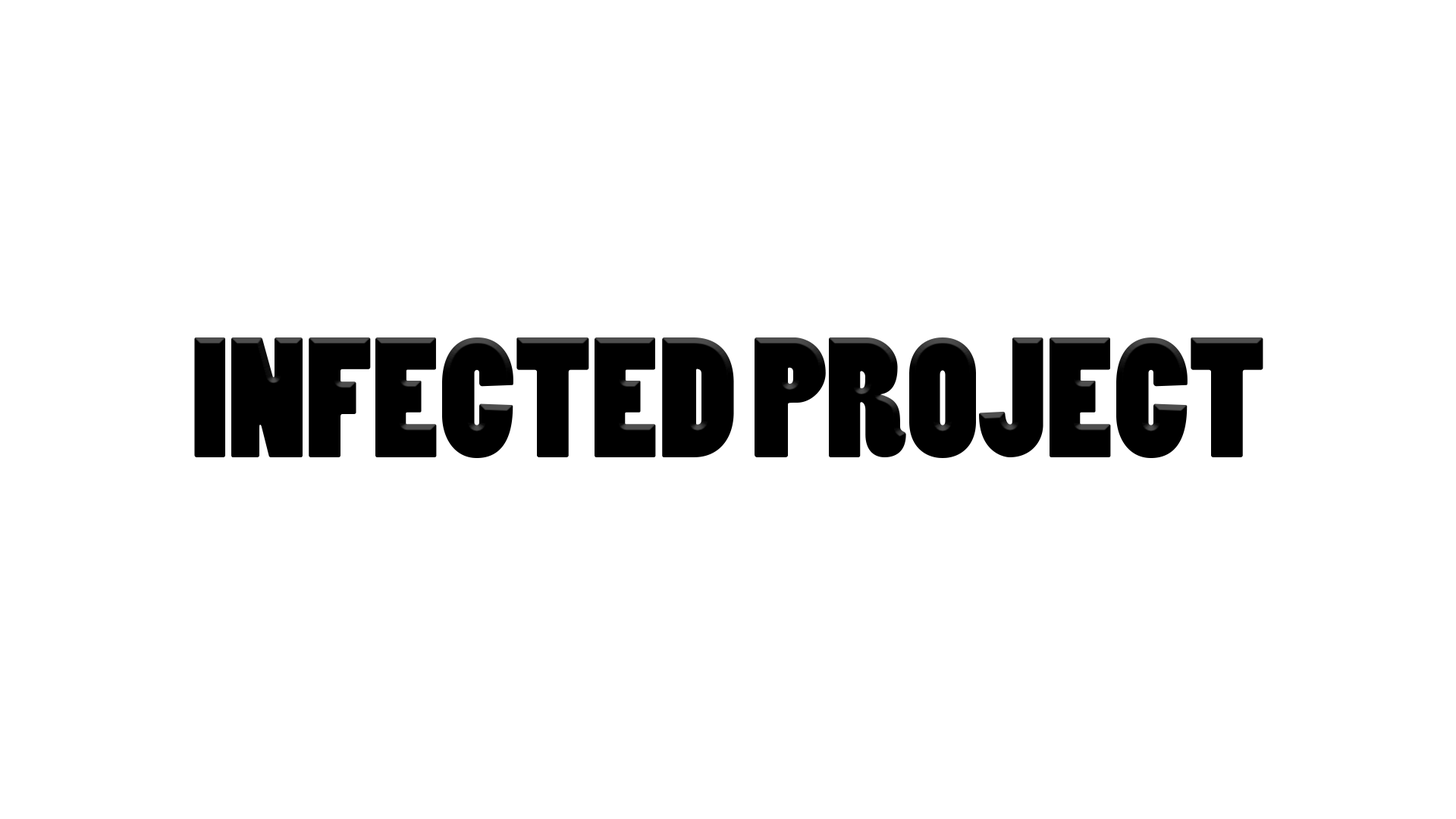
<style>
.page{position:relative;width:1456px;height:819px;background:#ffffff}
.page>*{position:absolute;margin:0}
.t1{font:160.2px "PoplarStd";color:#000000}
</style>
<div class="page">
<p class="t1" style="left:194px;top:337px;width:1069px;height:121px">INFECTED PROJECT</p>
</div>
